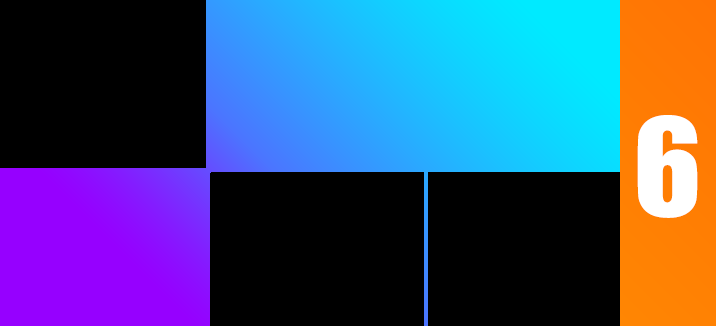
<style>
.page{position:relative;width:716px;height:326px;background:#000000}
.page>*{position:absolute;margin:0}
.t1{font:125px "Impact";color:#ffffff}
</style>
<div class="page">
<p class="t1" style="left:637px;top:115px;width:61px;height:103px">6</p>
</div>
